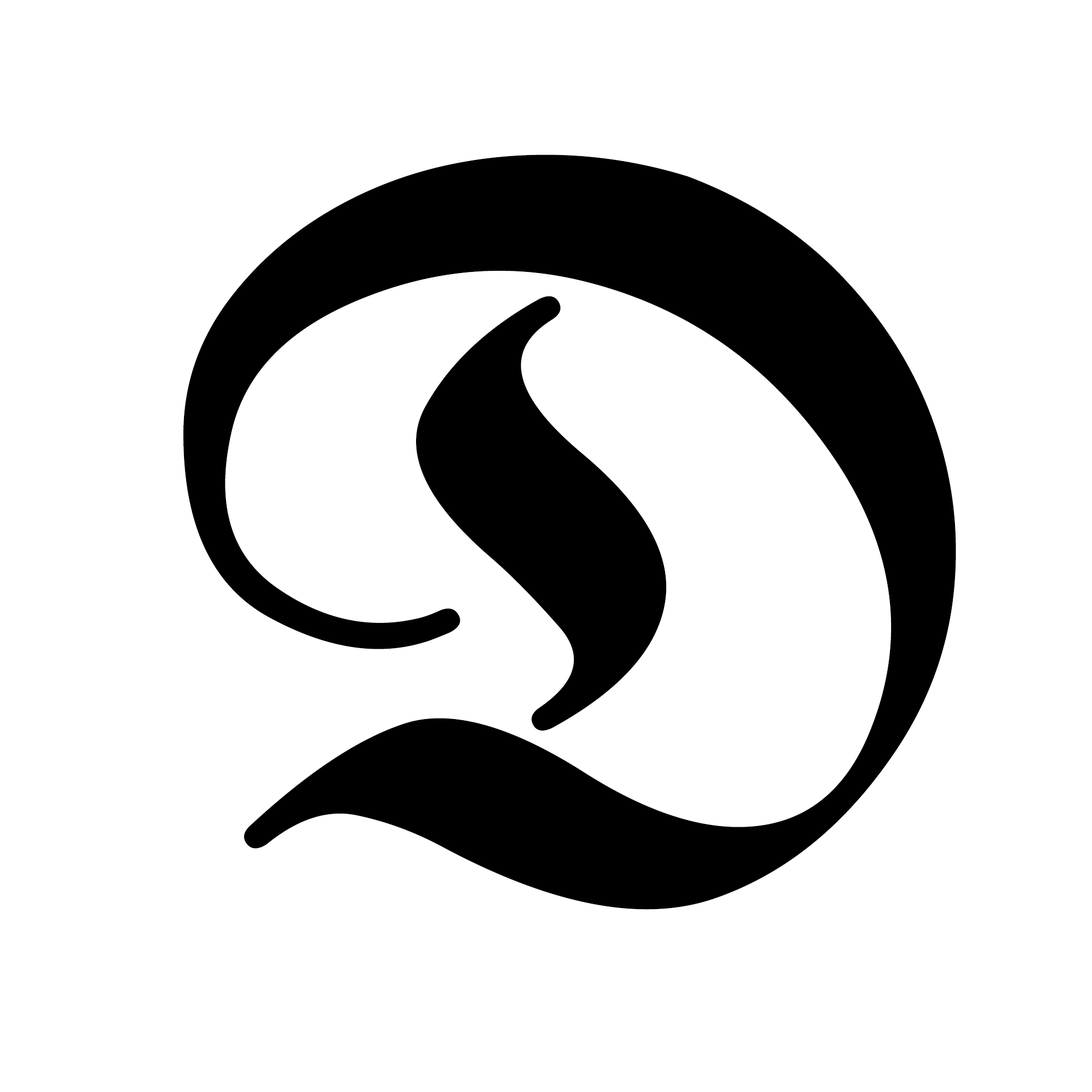
<style>
.page{position:relative;width:1092px;height:1092px;background:#ffffff}
.page>*{position:absolute;margin:0}
.t1{font:1021.2px "UnifrakturMaguntia";color:#000000}
</style>
<div class="page">
<p class="t1" style="left:183px;top:155px;width:773px;height:755px">D</p>
</div>
